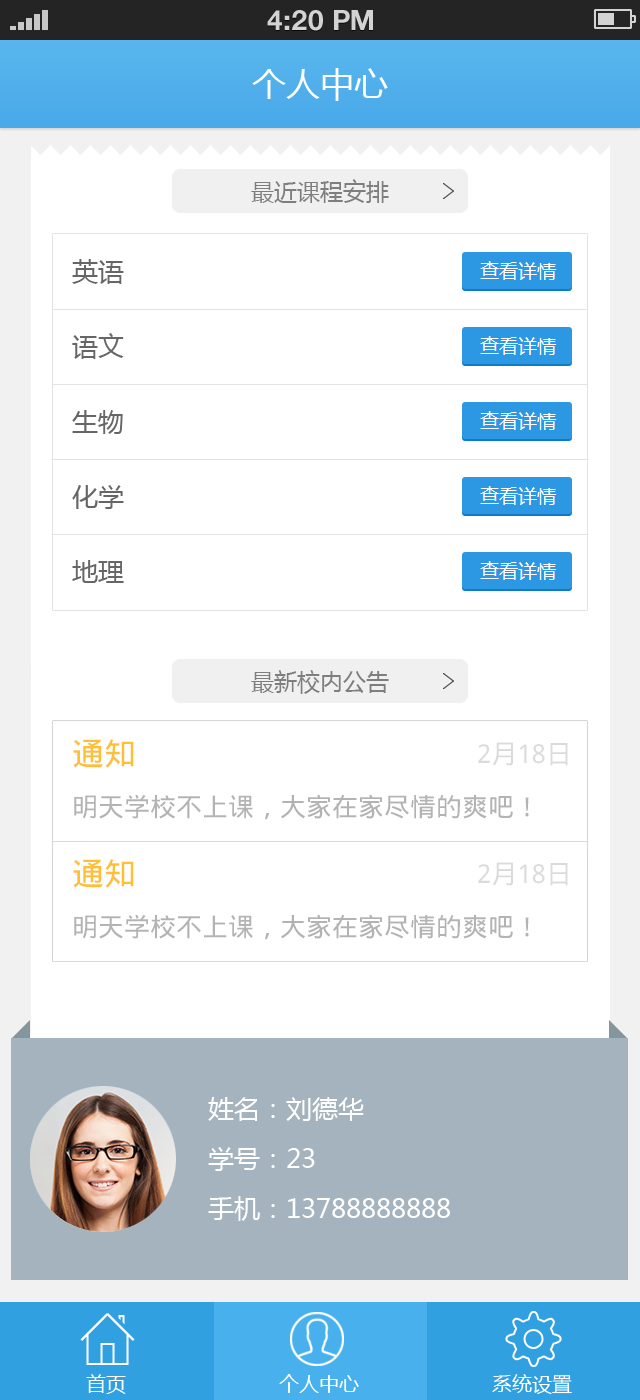
<style>
.page{position:relative;width:640px;height:1400px;background:#ffffff}
.page>*{position:absolute;margin:0}
.t1{font:28px "HelveticaNeueLTStd-Bd";color:#d3d3d3;text-transform:uppercase}
.t2{font:34px "MicrosoftYaHei";color:#ffffff}
.t3{font:23px "MicrosoftYaHei";color:#7e7e7e}
.t4{font:26px/75px "MicrosoftYaHei";color:#666666}
.t5{font:26px/50px "MicrosoftYaHei";color:#ffffff}
.t6{font:20px "MicrosoftYaHei";color:#ffffff}
</style>
<div class="page">
<p class="t1" style="left:267px;top:10px;width:106px;height:21px">4:20 PM</p>
<p class="t2" style="left:252px;top:68px;width:136px;height:33px">个人中心</p>
<p class="t3" style="left:251px;top:179px;width:138px;height:24px">最近课程安排</p>
<p class="t4" style="left:72px;top:259px;width:52px;height:324px">英语<br>语文<br>生物<br>化学<br>地理</p>
<p class="t3" style="left:251px;top:670px;width:138px;height:24px">最新校内公告</p>
<p class="t5" style="left:208px;top:1097px;width:242px;height:124px">姓名：刘德华<br>学号：23<br>手机：13788888888</p>
<p class="t6" style="left:86px;top:1374px;width:40px;height:20px">首页</p>
<p class="t6" style="left:279px;top:1374px;width:80px;height:19px">个人中心</p>
<p class="t6" style="left:492px;top:1374px;width:80px;height:20px">系统设置</p>
</div>
